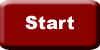
<style>
.page{position:relative;width:100px;height:50px;background:#8b0000}
.page>*{position:absolute;margin:0}
.t1{font:18px "Arial-Black";color:#fffeff}
</style>
<div class="page">
<p class="t1" style="left:25px;top:15px;width:49px;height:15px">Start</p>
</div>
